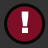
<style>
.page{position:relative;width:48px;height:48px;background:#333333}
.page>*{position:absolute;margin:0}
.t1{font:29.9px "Arial-Black";color:#ffffff}
</style>
<div class="page">
<p class="t1" style="left:21px;top:11px;width:8px;height:22px">!</p>
</div>
